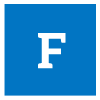
<style>
.page{position:relative;width:100px;height:100px;background:#0175c3}
.page>*{position:absolute;margin:0}
.t1{font:48px "Aleo-Bold";color:#ffffff;font-weight:bold}
</style>
<div class="page">
<p class="t1" style="left:38px;top:33px;width:28px;height:36px">F</p>
</div>
